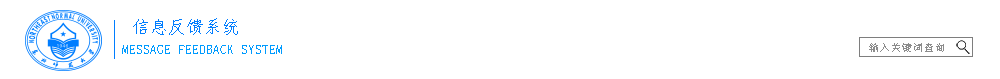
<style>
.page{position:relative;width:1000px;height:79px;background:#ffffff}
.page>*{position:absolute;margin:0}
.t1{font:18px "·ÂËÎ-Regular";color:#007dff}
.t2{font:14px "·ÂËÎ-Regular";color:#009bff}
</style>
<div class="page">
<p class="t1" style="left:133px;top:18px;width:105px;height:17px">信息反馈系统</p>
<p class="t2" style="left:122px;top:45px;width:160px;height:9px">MESSAGE FEEDBACK SYSTEM</p>
</div>
